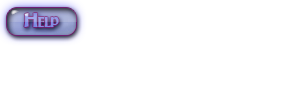
<style>
.page{position:relative;width:300px;height:100px;background:#ffffff}
.page>*{position:absolute;margin:0}
.t1{font:20px "LHFUncialCaps";color:#949de6;font-variant:small-caps}
</style>
<div class="page">
<p class="t1" style="left:24px;top:13px;width:35px;height:14px">Help</p>
</div>
